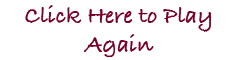
<style>
.page{position:relative;width:250px;height:60px;background:#ffffff}
.page>*{position:absolute;margin:0}
.t1{font:24px "BradleyHandITCTT-Bold";color:#7a0026}
</style>
<div class="page">
<p class="t1" style="left:25px;top:5px;width:187px;height:53px;text-align:center">Click Here to Play<br>Again</p>
</div>
